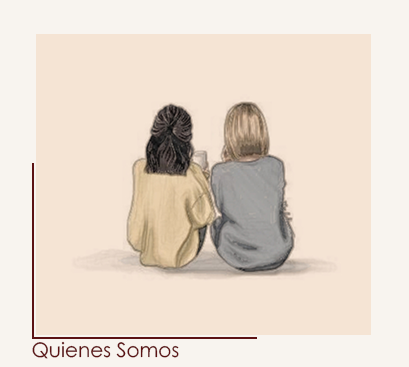
<style>
.page{position:relative;width:409px;height:367px;background:#f5e4d4}
.page>*{position:absolute;margin:0}
.t1{font:20px "CenturyGothic";color:#5c1213}
</style>
<div class="page">
<p class="t1" style="left:32px;top:341px;width:147px;height:18px">Quienes Somos</p>
</div>
